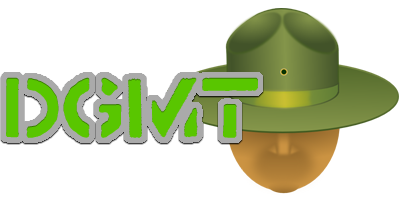
<style>
.page{position:relative;width:400px;height:200px;background:#ffffff}
.page>*{position:absolute;margin:0}
.t1{font:75px "Crass";color:#59c600}
</style>
<div class="page">
<p class="t1" style="left:6px;top:77px;width:252px;height:61px">DGMT</p>
</div>
